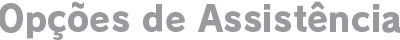
<style>
.page{position:relative;width:400px;height:40px;background:#ffffff}
.page>*{position:absolute;margin:0}
.t1{font:36px "RodinPro-EB";letter-spacing:0.003em;color:#989a9d;scale:0.94 1}
</style>
<div class="page">
<p class="t1" style="left:0px;top:1px;width:402px;height:39px">Opções de Assistência</p>
</div>
